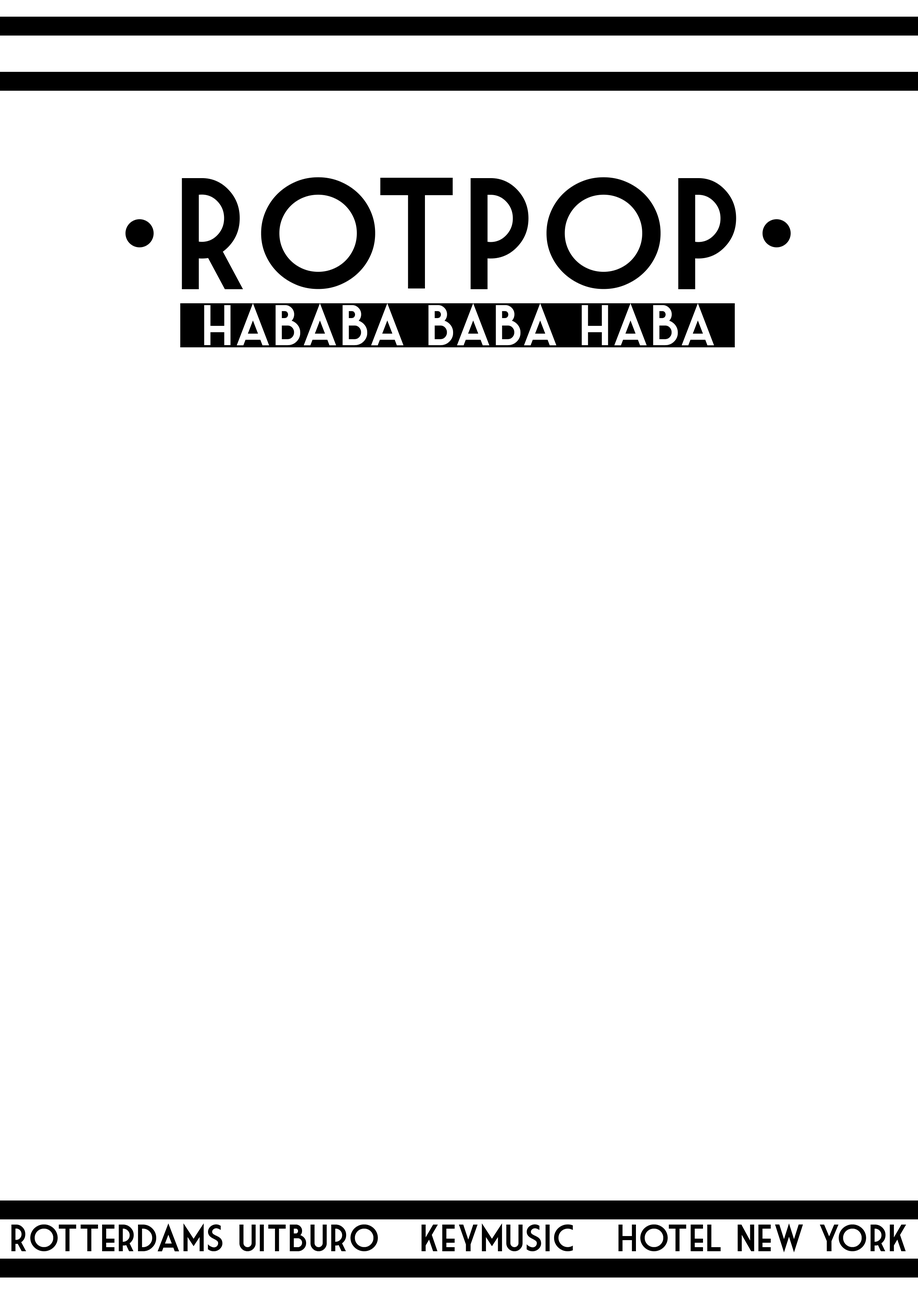
<style>
.page{position:relative;width:918px;height:1299px;background:#ffffff}
.page>*{position:absolute;margin:0}
.t1{font:154.3px "MarketDeco";color:#000000}
.t2{font:55.5px "MarketDeco";color:#ffffff}
.t3{font:37px "MarketDeco";color:#000000}
</style>
<div class="page">
<p class="t1" style="left:182px;top:177px;width:554px;height:112px">RotPOP</p>
<p class="t2" style="left:204px;top:303px;width:510px;height:42px">hababa baba haba</p>
<p class="t3" style="left:11px;top:1223px;width:367px;height:28px">Rotterdams Uitburo</p>
<p class="t3" style="left:421px;top:1223px;width:152px;height:28px">Keymusic</p>
</div>
